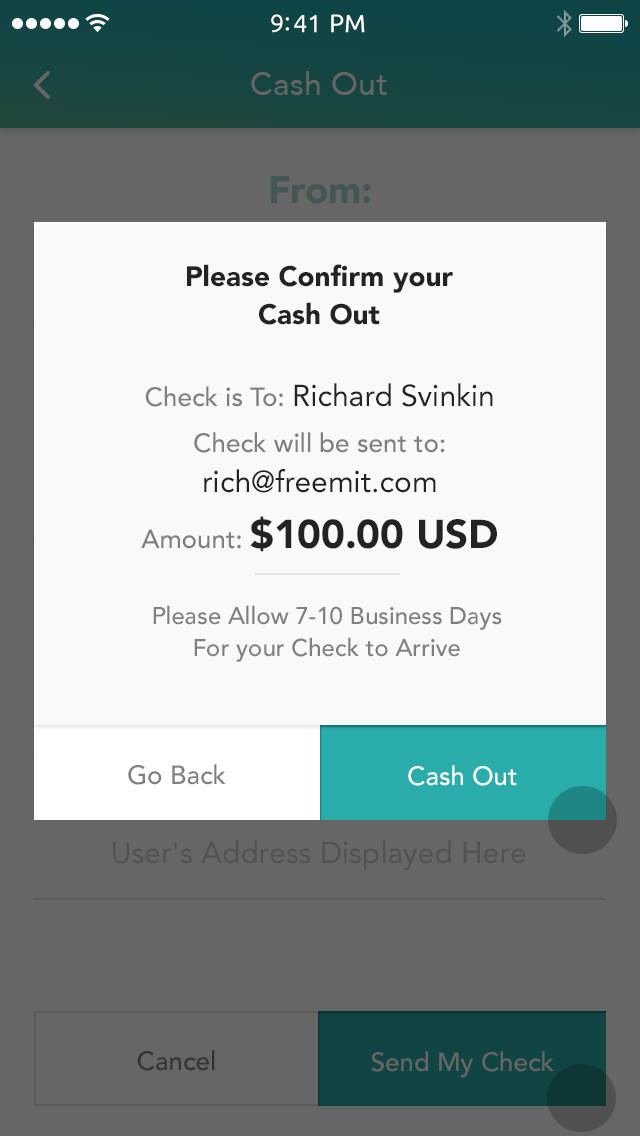
<style>
.page{position:relative;width:640px;height:1136px;background:#f9f9f9}
.page>*{position:absolute;margin:0}
.t1{font:28px/38px "Avenir-Black";color:#222325}
.t2{font:26px/46px "Avenir-Medium";color:#7f7f7f}
.t3{font:26px/56px "Avenir-Medium";color:#7f7f7f}
.t4{font:30px/56px "Avenir-Roman";color:#222325}
.t5{font:30px/40px "Avenir-Roman";color:#222325}
.t6{font:40px/56px "Avenir-Black";color:#222325}
.t7{font:24px/32px "Avenir-Medium";color:#7e7f7f}
.t8{font:26px "Avenir-Medium";color:#7e7f7f}
.t9{font:26px "Avenir-Medium";color:#ffffff}
</style>
<div class="page">
<p class="t1" style="left:187px;top:264px;width:266px;height:61px;text-align:center">Please Confirm your<br>Cash Out</p>
<p class="t2" style="left:141px;top:383px;width:356px;height:169px;text-align:center"><span class="t3">Check is To: </span><span class="t4">Richard Svinkin<br></span>Check will be sent to:<br><span class="t5">rich@freemit.com<br></span><span class="t3">Amount: </span><span class="t6">$100.00 USD</span></p>
<p class="t7" style="left:153px;top:605px;width:349px;height:57px;text-align:center">Please Allow 7-10 Business Days<br>For your Check to Arrive</p>
<p class="t8" style="left:128px;top:764px;width:98px;height:21px">Go Back</p>
<p class="t9" style="left:408px;top:765px;width:109px;height:21px">Cash Out</p>
</div>
